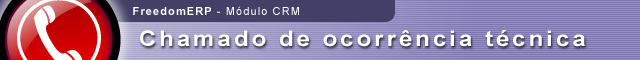
<style>
.page{position:relative;width:640px;height:60px}
.page>*{position:absolute;margin:0}
.t1{font:11px "ArialMT";letter-spacing:0.1em;color:#ffffff}
.t2{font:11px "Arial-BoldMT";letter-spacing:0.1em;color:#ffffff}
.t3{font:21.6px "Arial-BoldMT";letter-spacing:0.125em;color:#ffffff;scale:1.11 1}
</style>
<div class="page">
<p class="t1" style="left:133px;top:6px;width:166px;height:9px"><span class="t2">FreedomERP</span> - Módulo CRM</p>
<p class="t3" style="left:140px;top:30px;width:445px;height:17px">Chamado de ocorrência técnica</p>
</div>
